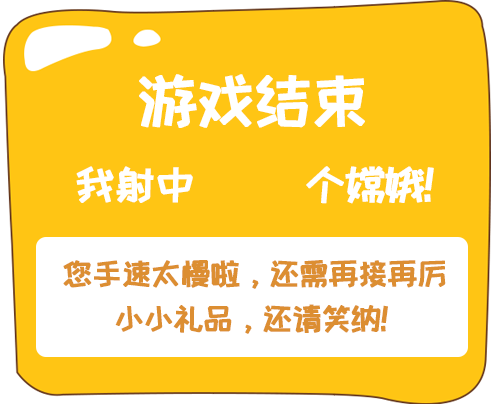
<style>
.page{position:relative;width:493px;height:404px;background:#ffc514}
.page>*{position:absolute;margin:0}
.t1{font:61.7px "HappyZcool-2016";letter-spacing:-0.1em;color:#ffffff;font-weight:bold}
.t2{font:43.1px "HappyZcool-2016";letter-spacing:-0.1em;color:#ffffff;font-weight:bold}
.t3{font:31.9px "HappyZcool-2016";letter-spacing:-0.1em;color:#dc8e32;font-weight:bold}
</style>
<div class="page">
<p class="t1" style="left:139px;top:74px;width:226px;height:54px">游戏结束</p>
<p class="t2" style="left:76px;top:166px;width:358px;height:38px">我射中      个嫦娥!</p>
<p class="t3" style="left:63px;top:260px;width:383px;height:29px">您手速太慢啦，还需再接再厉</p>
<p class="t3" style="left:115px;top:304px;width:273px;height:30px">小小礼品，还请笑纳！</p>
</div>
